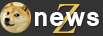
<style>
.page{position:relative;width:103px;height:36px;background:#333333}
.page>*{position:absolute;margin:0}
.t1{font:54px "Aparajita-Italic";letter-spacing:0.025em;color:#ebc05f}
.t2{font:26px "Mangal-Bold";letter-spacing:0.025em;color:#ffffff}
</style>
<div class="page">
<p class="t1" style="left:52px;top:4px;width:28px;height:29px">Z</p>
<p class="t2" style="left:35px;top:12px;width:64px;height:14px">news</p>
</div>
